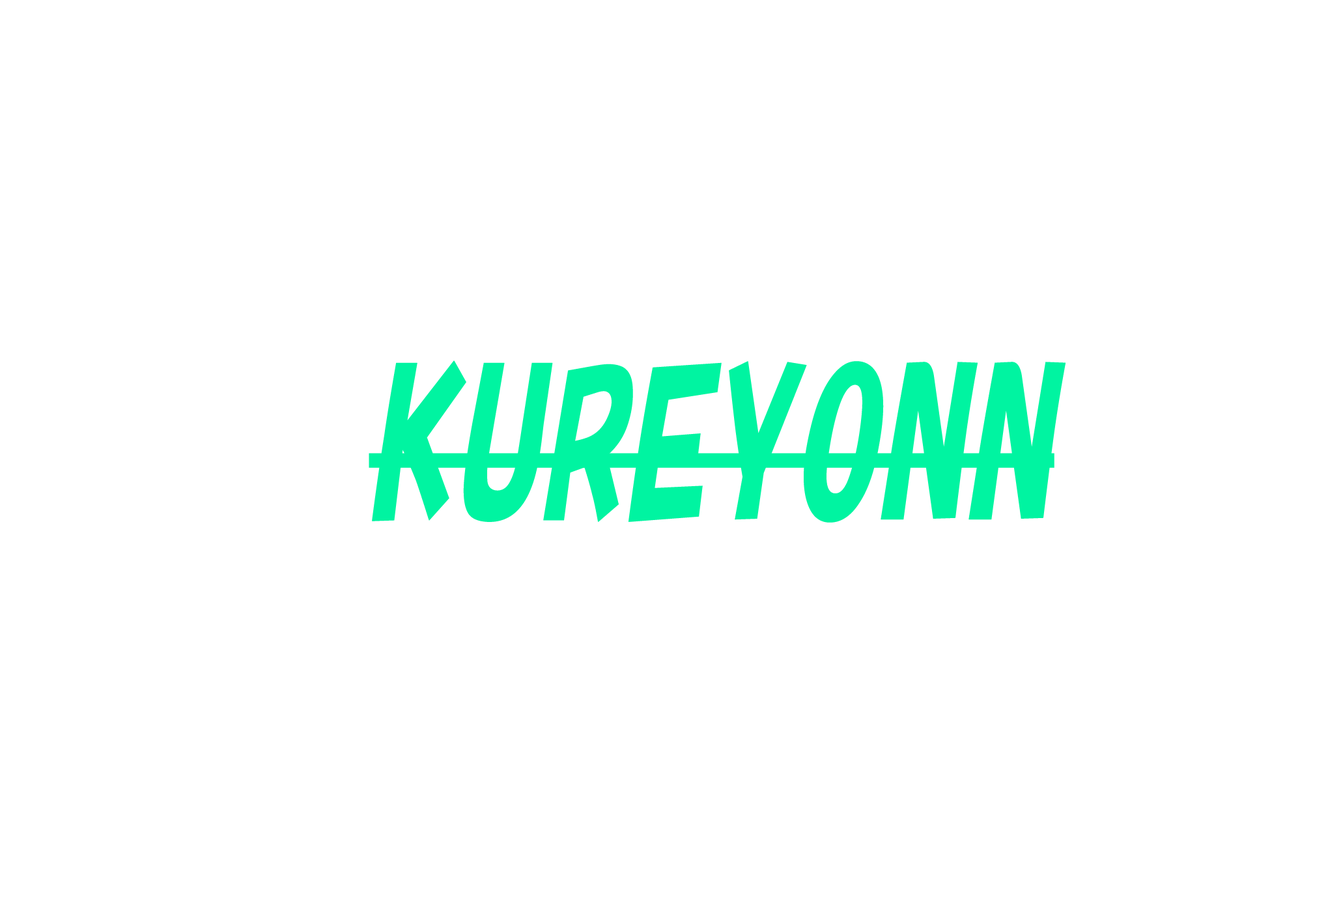
<style>
.page{position:relative;width:1328px;height:898px;background:#ffffff}
.page>*{position:absolute;margin:0}
.t1{font:333px "HGPSoeiKakupoptai";color:#00f4a1;text-transform:uppercase;font-weight:bold;font-style:italic;scale:0.68 1}
</style>
<div class="page">
<p class="t1" style="left:369px;top:360px;width:697px;height:162px">kureyonn</p>
</div>
